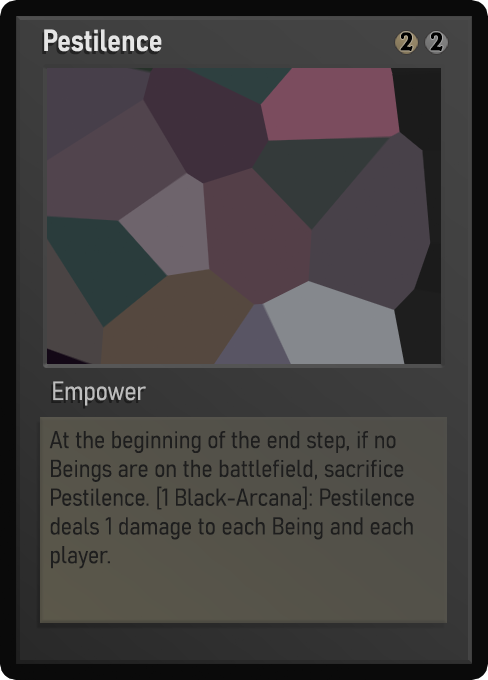
<style>
.page{position:relative;width:488px;height:680px}
.page>*{position:absolute;margin:0}
.t1{font:30px "Bahnschrift-SemiBoldSemiCondensed";color:#f2f2f2;font-weight:bold}
.t2{font:25px "WTRRoycroft";color:#000000;font-weight:bold;scale:1.09 1}
.t3{font:26px "Bahnschrift-LightSemiCondensed";color:#c8c8c8;font-weight:bold}
.t4{font:24px "Bahnschrift-LightSemiCondensed";color:#1e1e1e;font-weight:bold}
</style>
<div class="page">
<p class="t1" style="left:44px;top:29px;width:118px;height:23px;opacity:0.9">Pestilence</p>
<p class="t2" style="left:400px;top:32px;width:13px;height:19px">2</p>
<p class="t2" style="left:430px;top:32px;width:13px;height:19px">2</p>
<p class="t3" style="left:53px;top:381px;width:93px;height:25px;opacity:0.9">Empower</p>
<p class="t4" style="left:49px;top:431px;width:365px;height:138px">At the beginning of the end step, if no Beings are on the battlefield, sacrifice Pestilence. [1 Black-Arcana]: Pestilence deals 1 damage to each Being and each player.</p>
</div>
